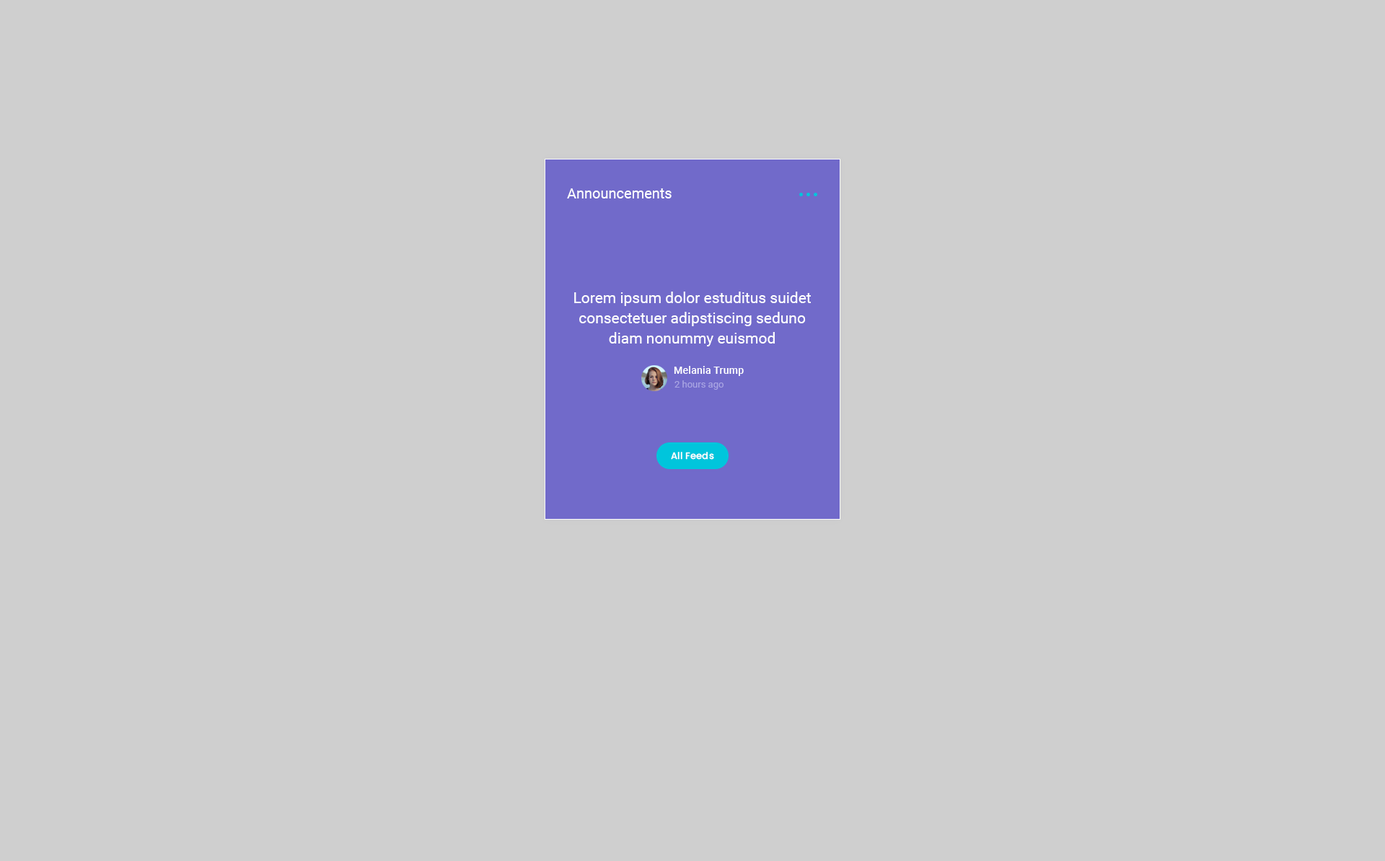
<style>
.page{position:relative;width:1385px;height:861px;background:#cfcfcf}
.page>*{position:absolute;margin:0}
.t1{font:14.4px "Roboto-Regular";color:#ffffff}
.t2{font:15.2px/20.2px "Roboto-Regular";color:#ffffff}
.t3{font:10.1px "Roboto-Medium";letter-spacing:0.02em;color:#ffffff}
.t4{font:9.4px "Roboto-Regular";color:#a9a5e3}
.t5{font:9.4px "Poppins-Medium";letter-spacing:0.02em;color:#ffffff}
</style>
<div class="page">
<p class="t1" style="left:567px;top:188px;width:105px;height:10px">Announcements</p>
<p class="t2" style="left:574px;top:291px;width:237px;height:55px;text-align:center">Lorem ipsum dolor estuditus suidet consectetuer adipstiscing seduno<br>diam nonummy euismod</p>
<p class="t3" style="left:674px;top:366px;width:70px;height:10px">Melania Trump</p>
<p class="t4" style="left:675px;top:380px;width:49px;height:10px">2 hours ago</p>
<p class="t5" style="left:671px;top:452px;width:43px;height:8px">All Feeds</p>
</div>
